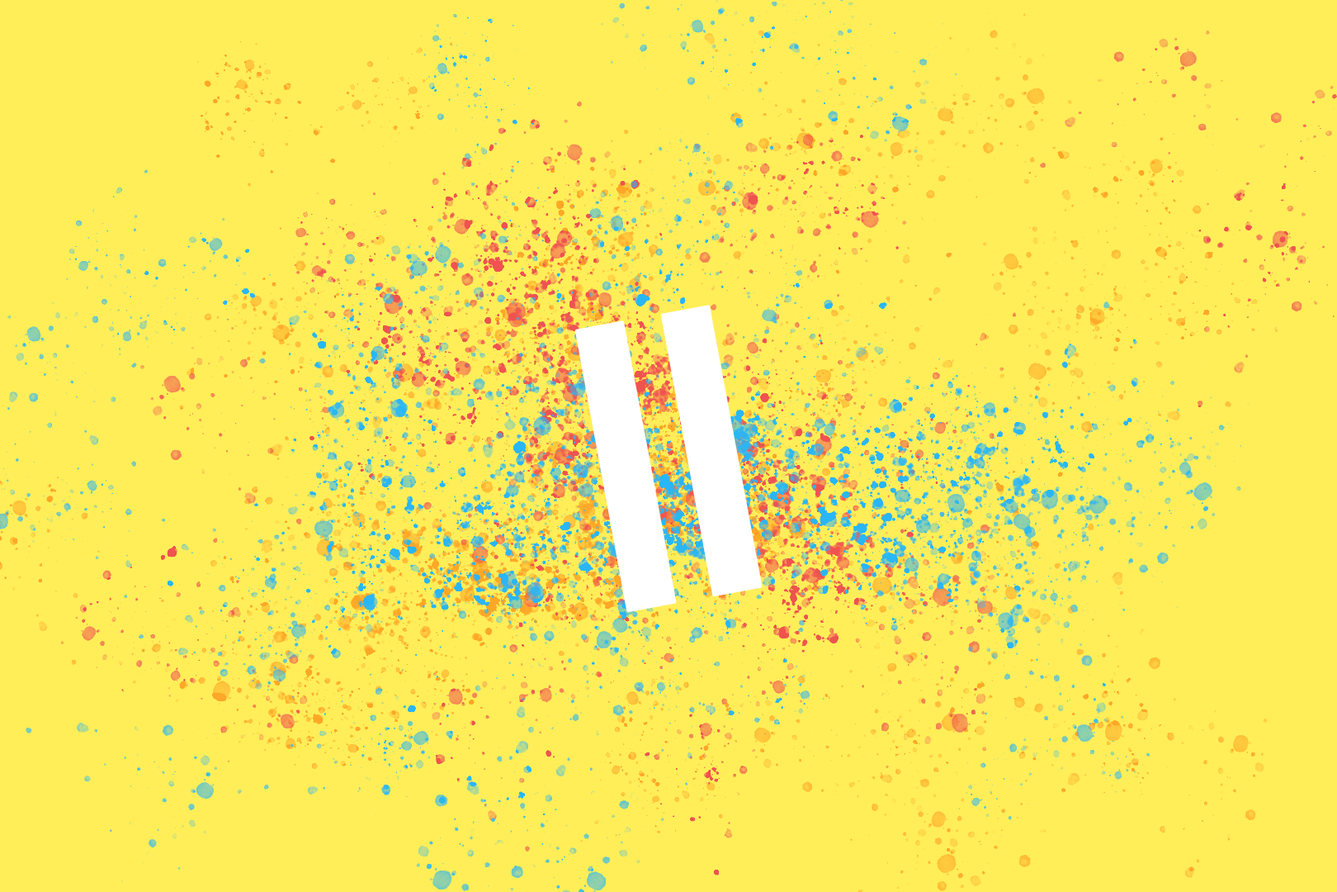
<style>
.page{position:relative;width:1337px;height:892px;background:#ffee58}
.page>*{position:absolute;margin:0}
.t1{font:412.8px "Staatliches-Regular";color:#ffffff}
</style>
<div class="page">
<p class="t1" style="left:575px;top:305px;width:188px;height:307px;rotate:-11deg">II</p>
</div>
